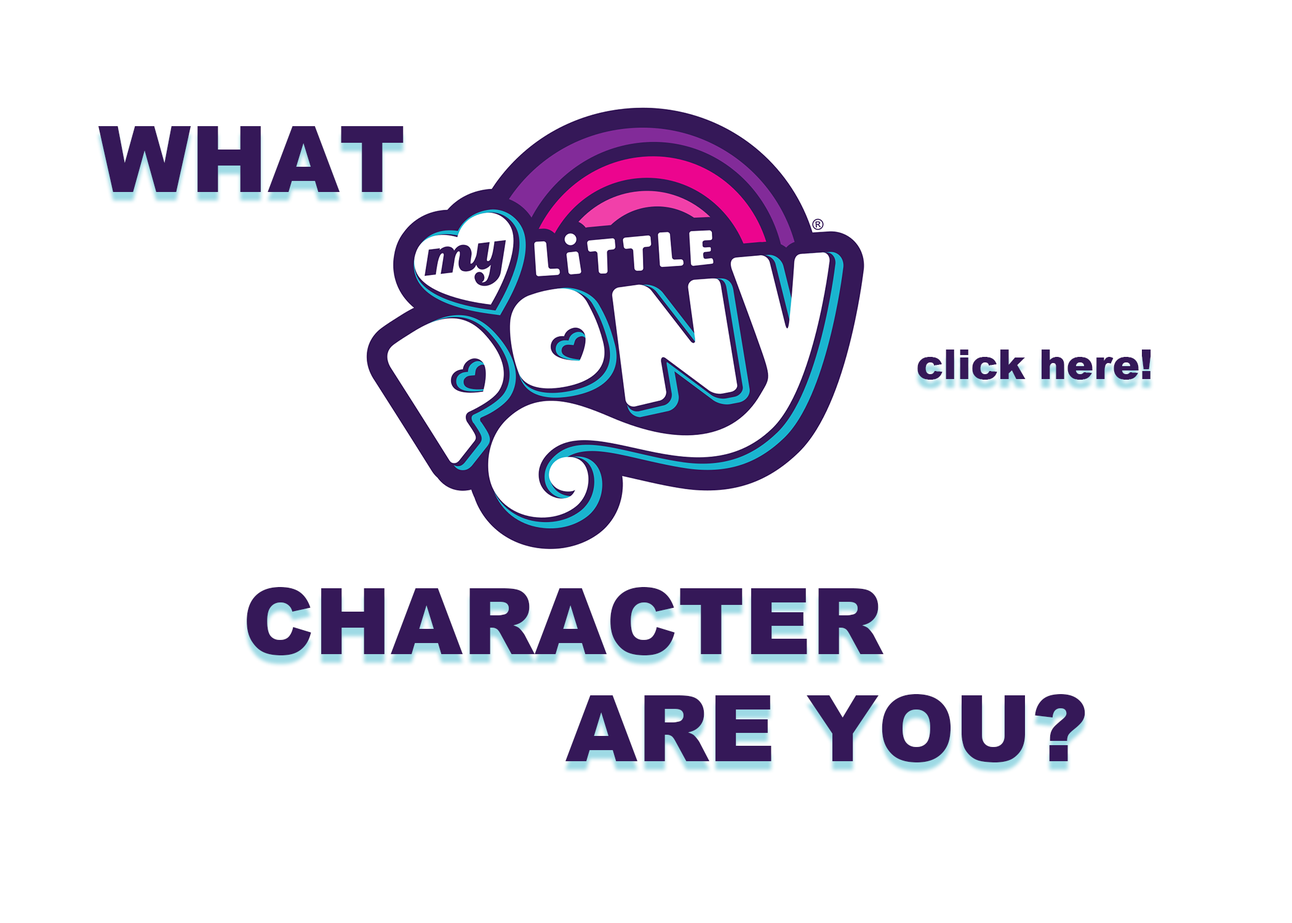
<style>
.page{position:relative;width:1292px;height:923px;background:#ffffff}
.page>*{position:absolute;margin:0}
.t1{font:92.3px "Arial-Black";color:#351858}
.t2{font:41px "Arial-Black";color:#351858}
</style>
<div class="page">
<p class="t1" style="left:98px;top:126px;width:306px;height:66px">WHAT</p>
<p class="t2" style="left:917px;top:349px;width:234px;height:31px">click here!</p>
<p class="t1" style="left:247px;top:587px;width:637px;height:68px">CHARACTER</p>
<p class="t1" style="left:565px;top:694px;width:520px;height:68px">ARE YOU?</p>
</div>
